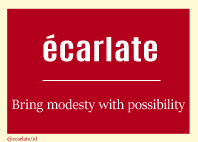
<style>
.page{position:relative;width:198px;height:142px;background:#b3001d}
.page>*{position:absolute;margin:0}
.t1{font:27.9px "Antonio-Bold";color:#fdfdfa;scale:1.29 1}
.t2{font:15px "SitkaBanner";color:#fdfdfa}
.t3{font:6px "SitkaBanner"}
</style>
<div class="page">
<p class="t1" style="left:43px;top:34px;width:114px;height:28px">écarlate</p>
<p class="t2" style="left:12px;top:99px;width:174px;height:14px">Bring modesty with possibility</p>
<p class="t3" style="left:7px;top:136px;width:30px;height:6px">@ecarlate/id</p>
</div>
